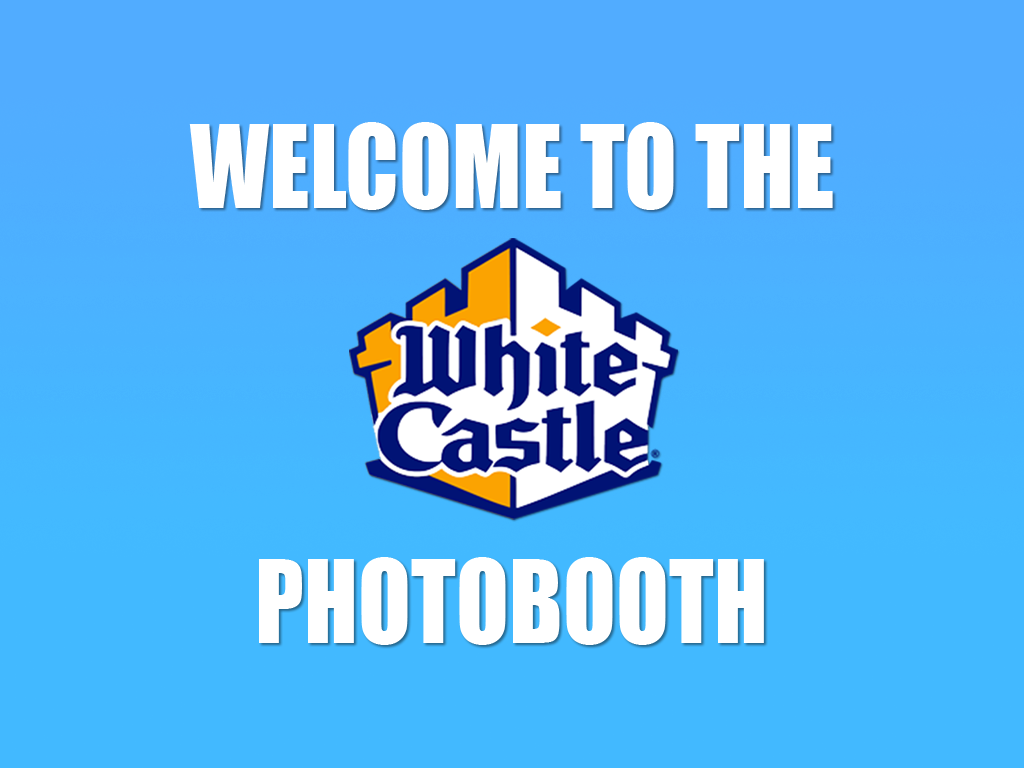
<style>
.page{position:relative;width:1024px;height:768px;background:#42b9ff}
.page>*{position:absolute;margin:0}
.t1{font:106.3px "Impact";color:#ffffff;scale:0.91 1}
</style>
<div class="page">
<p class="t1" style="left:189px;top:122px;width:644px;height:88px">WELCOME TO THE</p>
<p class="t1" style="left:259px;top:557px;width:505px;height:88px">PHOTOBOOTH</p>
</div>
